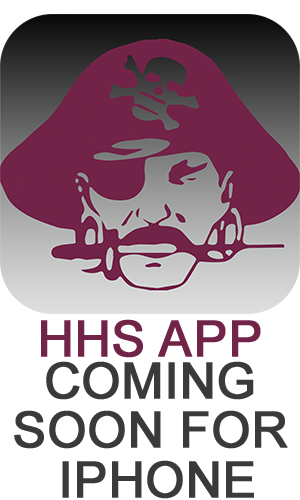
<style>
.page{position:relative;width:300px;height:500px;background:#ffffff}
.page>*{position:absolute;margin:0}
.t1{font:49.9px "ArialMT";color:#722448;text-transform:uppercase;font-weight:bold}
.t2{font:49.9px/49.3px "ArialMT";color:#3a3a3a;text-transform:uppercase;font-weight:bold}
</style>
<div class="page">
<p class="t1" style="left:41px;top:319px;width:220px;height:39px">HHS App</p>
<p class="t2" style="left:14px;top:361px;width:274px;height:138px;text-align:center">Coming <br>Soon for <br>iPhone</p>
</div>
